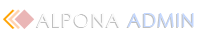
<style>
.page{position:relative;width:200px;height:40px;background:#ffffff}
.page>*{position:absolute;margin:0}
.t1{font:19px "CenturyGothic";letter-spacing:0.05em;color:#c4d8ff;text-transform:uppercase}
.t2{font:19px "CenturyGothic";letter-spacing:0.05em;color:#f9f9f9;text-transform:uppercase}
.t3{font:19px "CenturyGothic";letter-spacing:0.05em;color:#ffffff;text-transform:uppercase}
</style>
<div class="page">
<p class="t1" style="left:36px;top:13px;width:158px;height:14px"><span class="t2">Alp</span><span class="t3">o</span><span class="t2">na </span>Admin</p>
</div>
